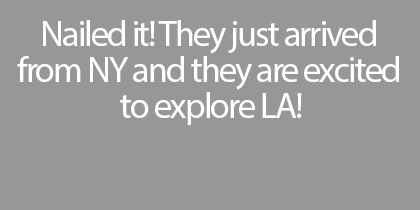
<style>
.page{position:relative;width:420px;height:210px;background:#979797}
.page>*{position:absolute;margin:0}
.t1{font:36px/36px "MyriadPro-Regular";letter-spacing:-0.05em;color:#ffffff}
</style>
<div class="page">
<p class="t1" style="left:17px;top:20px;width:382px;height:105px;text-align:center">Nailed it! They just arrived <br>from NY and they are excited <br>to explore LA!</p>
</div>
